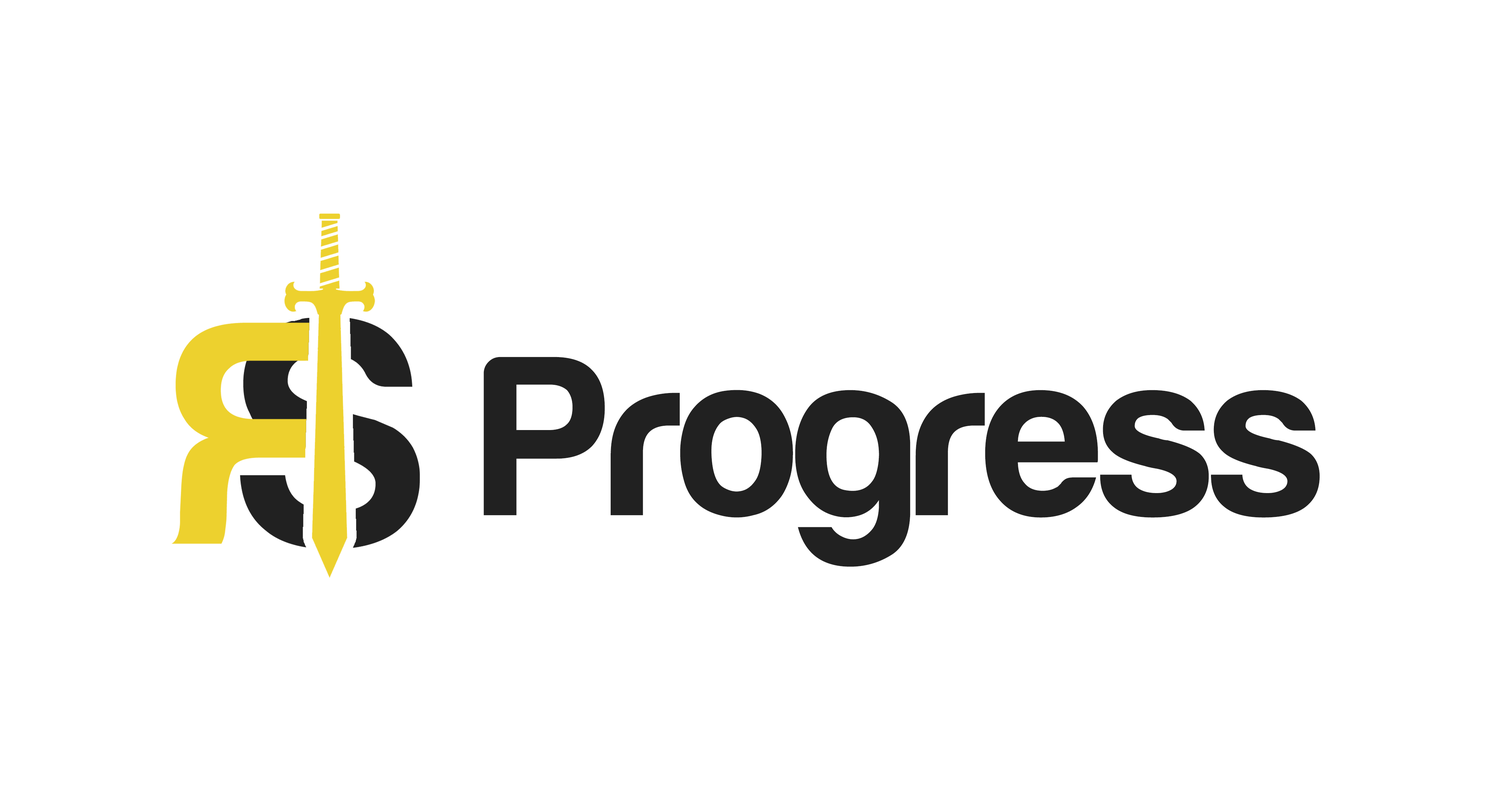
<style>
.page{position:relative;width:1488px;height:801px;background:#ffffff}
.page>*{position:absolute;margin:0}
.t1{font:235.4px "Harabara";color:#212121}
</style>
<div class="page">
<p class="t1" style="left:484px;top:357px;width:836px;height:210px">Progress</p>
</div>
